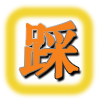
<style>
.page{position:relative;width:100px;height:100px}
.page>*{position:absolute;margin:0}
.t1{font:60px "STZhongsong";color:#f5831d;font-weight:bold}
</style>
<div class="page">
<p class="t1" style="left:19px;top:21px;width:60px;height:58px">踩</p>
</div>
